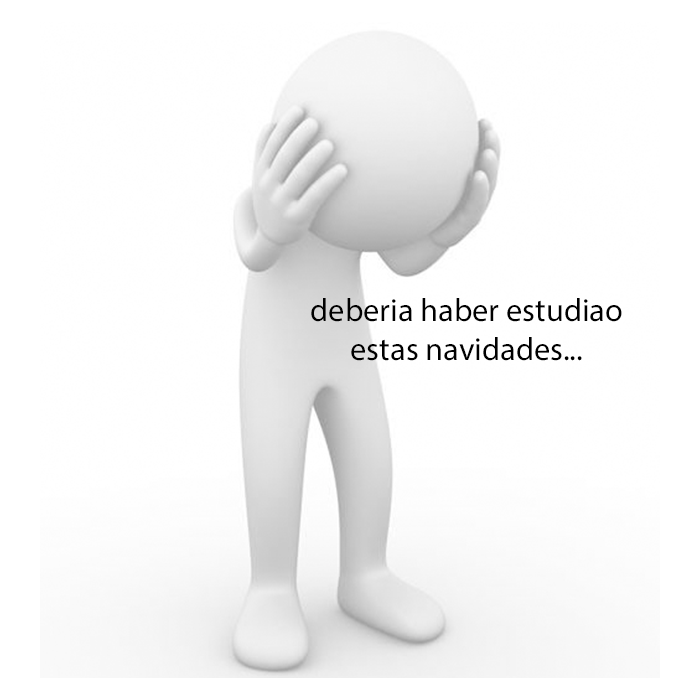
<style>
.page{position:relative;width:700px;height:700px;background:#ffffff}
.page>*{position:absolute;margin:0}
.t1{font:32.4px "MyriadPro-Regular";color:#000000}
</style>
<div class="page">
<p class="t1" style="left:311px;top:298px;width:311px;height:63px;text-align:center">deberia haber estudiao<br>estas navidades...</p>
</div>
